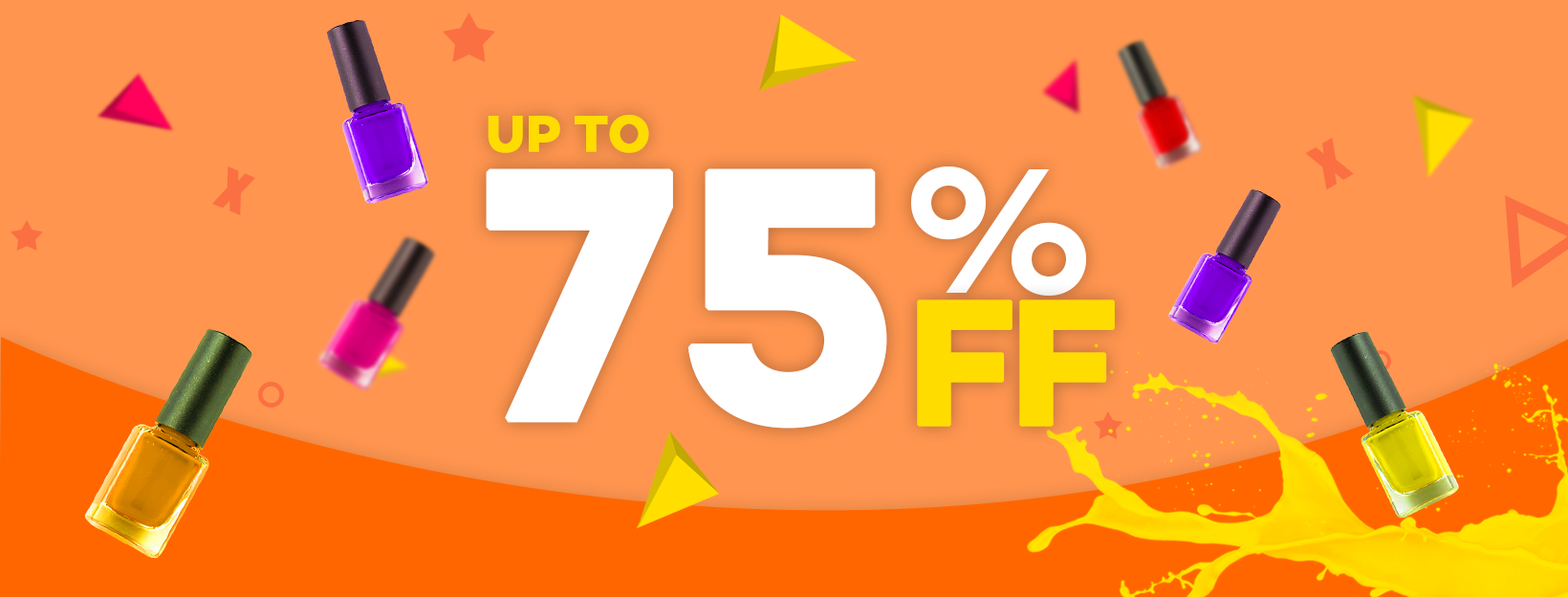
<style>
.page{position:relative;width:1568px;height:597px;background:#ff954f}
.page>*{position:absolute;margin:0}
.t1{font:52.6px "Campton-BoldDEMO";color:#ffdc00;text-transform:uppercase;font-weight:bold}
.t2{font:363.3px "Campton-BoldDEMO";letter-spacing:0.01em;color:#ffffff;text-transform:uppercase;font-weight:bold}
.t3{font:181.7px "Campton-BoldDEMO";letter-spacing:-0.05em;color:#ffffff}
.t4{font:181.7px "Campton-BoldDEMO";letter-spacing:-0.05em;color:#ffdc00;text-transform:uppercase;font-weight:bold}
</style>
<div class="page">
<p class="t1" style="left:488px;top:115px;width:161px;height:38px">Up to</p>
<p class="t2" style="left:486px;top:168px;width:401px;height:260px">75</p>
<p class="t3" style="left:911px;top:166px;width:175px;height:130px">%</p>
<p class="t4" style="left:917px;top:299px;width:198px;height:127px">ff</p>
</div>
